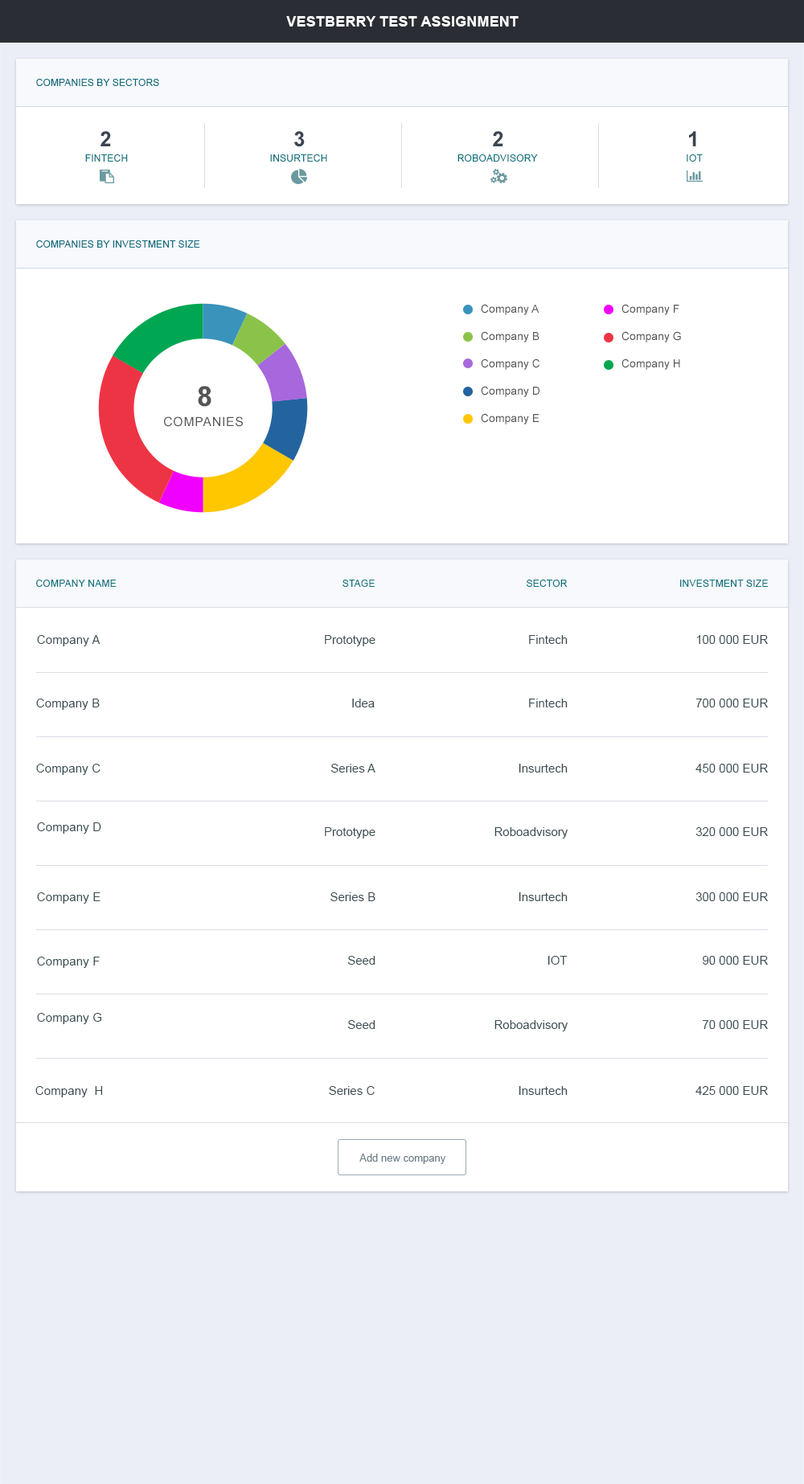
<style>
.page{position:relative;width:804px;height:1484px;background:#ffffff}
.page>*{position:absolute;margin:0}
.t1{font:14.5px "Arial-BoldMT";letter-spacing:0.01em;color:#ffffff}
.t2{font:9.6px "ArialMT";letter-spacing:0.01em;color:#0c6b7c}
.t3{font:20.9px "Arial-BoldMT";letter-spacing:-0.04em;color:#3b4452}
.t4{font:9.6px "ArialMT";letter-spacing:0.02em;color:#0d7380;text-transform:uppercase}
.t5{font:11.3px/19.3px "ArialMT";color:#555555}
.t6{font:27.4px "Arial-BoldMT";color:#555555}
.t7{font:12.6px "ArialMT";letter-spacing:0.05em;color:#555555;text-transform:uppercase}
.t8{font:12.1px "ArialMT";letter-spacing:0.01em;color:#394c52}
.t9{font:12.1px "ArialMT";color:#394c52}
.t10{font:10.4px "ArialMT";color:#70818a}
</style>
<div class="page">
<p class="t1" style="left:286px;top:16px;width:232px;height:11px">VESTBERRY TEST ASSIGNMENT</p>
<p class="t2" style="left:36px;top:79px;width:123px;height:7px">COMPANIES BY SECTORS</p>
<p class="t3" style="left:100px;top:131px;width:11px;height:15px">2</p>
<p class="t3" style="left:294px;top:131px;width:11px;height:16px">3</p>
<p class="t3" style="left:493px;top:131px;width:10px;height:15px">2</p>
<p class="t3" style="left:689px;top:131px;width:7px;height:15px">1</p>
<p class="t4" style="left:85px;top:154px;width:43px;height:8px">FINTECH</p>
<p class="t4" style="left:270px;top:154px;width:57px;height:8px">INSURTECH</p>
<p class="t4" style="left:457px;top:154px;width:81px;height:8px">ROBOADVISORY</p>
<p class="t4" style="left:686px;top:154px;width:16px;height:8px">IOT</p>
<p class="t2" style="left:36px;top:240px;width:164px;height:8px">COMPANIES BY INVESTMENT SIZE</p>
<p class="t5" style="left:481px;top:304px;width:58px;height:120px">Company A<br>Company B<br>Company C<br>Company D<br>Company E</p>
<p class="t5" style="left:621px;top:304px;width:60px;height:66px">Company F<br>Company G<br>Company H</p>
<p class="t6" style="left:198px;top:386px;width:13px;height:21px">8</p>
<p class="t7" style="left:164px;top:416px;width:79px;height:11px">companies</p>
<p class="t4" style="left:36px;top:579px;width:81px;height:8px">Company name</p>
<p class="t4" style="left:342px;top:579px;width:33px;height:8px">STAGE</p>
<p class="t4" style="left:526px;top:579px;width:41px;height:8px">SECTOR</p>
<p class="t4" style="left:680px;top:579px;width:88px;height:8px">INVESTMENT SIZE</p>
<p class="t8" style="left:37px;top:635px;width:63px;height:11px">Company A</p>
<p class="t9" style="left:325px;top:635px;width:50px;height:11px">Prototype</p>
<p class="t9" style="left:529px;top:635px;width:38px;height:9px">Fintech</p>
<p class="t9" style="left:696px;top:635px;width:72px;height:9px">100 000 EUR</p>
<p class="t8" style="left:36px;top:698px;width:64px;height:12px">Company B</p>
<p class="t9" style="left:352px;top:698px;width:23px;height:9px">Idea</p>
<p class="t9" style="left:529px;top:698px;width:38px;height:9px">Fintech</p>
<p class="t9" style="left:695px;top:698px;width:73px;height:9px">700 000 EUR</p>
<p class="t8" style="left:36px;top:764px;width:64px;height:11px">Company C</p>
<p class="t9" style="left:330px;top:764px;width:45px;height:8px">Series A</p>
<p class="t9" style="left:518px;top:764px;width:49px;height:8px">Insurtech</p>
<p class="t9" style="left:695px;top:764px;width:73px;height:8px">450 000 EUR</p>
<p class="t8" style="left:37px;top:822px;width:64px;height:11px">Company D</p>
<p class="t9" style="left:325px;top:827px;width:50px;height:11px">Prototype</p>
<p class="t9" style="left:494px;top:827px;width:73px;height:11px">Roboadvisory</p>
<p class="t9" style="left:695px;top:827px;width:73px;height:9px">320 000 EUR</p>
<p class="t8" style="left:37px;top:892px;width:63px;height:11px">Company E</p>
<p class="t9" style="left:330px;top:892px;width:45px;height:9px">Series B</p>
<p class="t9" style="left:518px;top:892px;width:49px;height:9px">Insurtech</p>
<p class="t9" style="left:695px;top:892px;width:73px;height:9px">300 000 EUR</p>
<p class="t8" style="left:37px;top:956px;width:63px;height:12px">Company F</p>
<p class="t9" style="left:347px;top:956px;width:28px;height:8px">Seed</p>
<p class="t9" style="left:547px;top:956px;width:20px;height:8px">IOT</p>
<p class="t9" style="left:702px;top:956px;width:66px;height:8px">90 000 EUR</p>
<p class="t8" style="left:37px;top:1013px;width:65px;height:11px">Company G</p>
<p class="t9" style="left:347px;top:1020px;width:28px;height:9px">Seed</p>
<p class="t9" style="left:494px;top:1020px;width:73px;height:11px">Roboadvisory</p>
<p class="t9" style="left:702px;top:1020px;width:66px;height:9px">70 000 EUR</p>
<p class="t8" style="left:35px;top:1086px;width:68px;height:11px">Company  H</p>
<p class="t9" style="left:329px;top:1086px;width:46px;height:9px">Series C</p>
<p class="t9" style="left:518px;top:1086px;width:49px;height:9px">Insurtech</p>
<p class="t9" style="left:695px;top:1086px;width:73px;height:9px">425 000 EUR</p>
<p class="t10" style="left:359px;top:1153px;width:87px;height:11px">Add new company</p>
</div>
